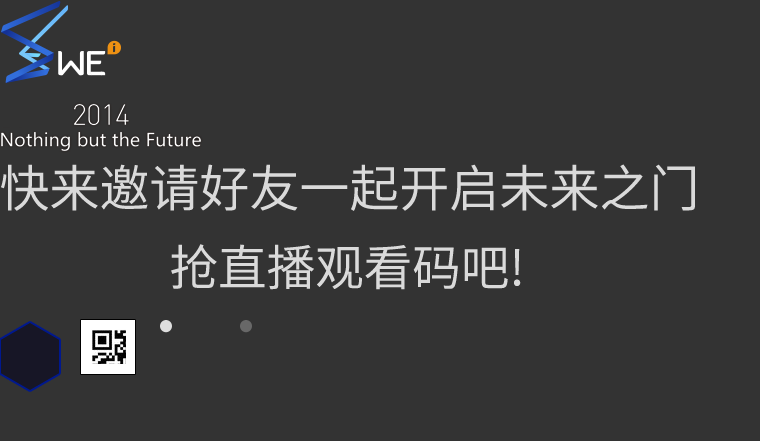
<style>
.page{position:relative;width:760px;height:441px;background:#333333}
.page>*{position:absolute;margin:0}
.t1{font:50px "SourceHanSansSC-Normal";color:#dadada;text-transform:uppercase}
.t2{font:48.6px "SourceHanSansSC-Normal";color:#dadada;text-transform:uppercase}
</style>
<div class="page">
<p class="t1" style="left:1px;top:164px;width:694px;height:47px">快来邀请好友一起开启未来之门</p>
<p class="t2" style="left:171px;top:244px;width:350px;height:46px">抢直播观看码吧!</p>
</div>
